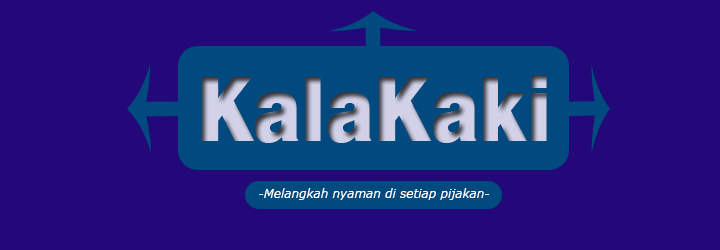
<style>
.page{position:relative;width:720px;height:250px;background:#220878}
.page>*{position:absolute;margin:0}
.t1{font:89.7px "Swiss721BT-Black";color:#d1d2e8;scale:0.79 1}
.t2{font:12px "Verdana-Italic";color:#fefefe}
</style>
<div class="page">
<p class="t1" style="left:201px;top:75px;width:346px;height:68px">KalaKaki</p>
<p class="t2" style="left:259px;top:188px;width:231px;height:12px">-Melangkah nyaman di setiap pijakan-</p>
</div>
